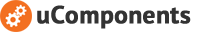
<style>
.page{position:relative;width:200px;height:32px;background:#ffffff}
.page>*{position:absolute;margin:0}
.t1{font:25px "PTSans-Bold";color:#333333;font-weight:bold}
</style>
<div class="page">
<p class="t1" style="left:37px;top:5px;width:154px;height:24px">uComponents</p>
</div>
